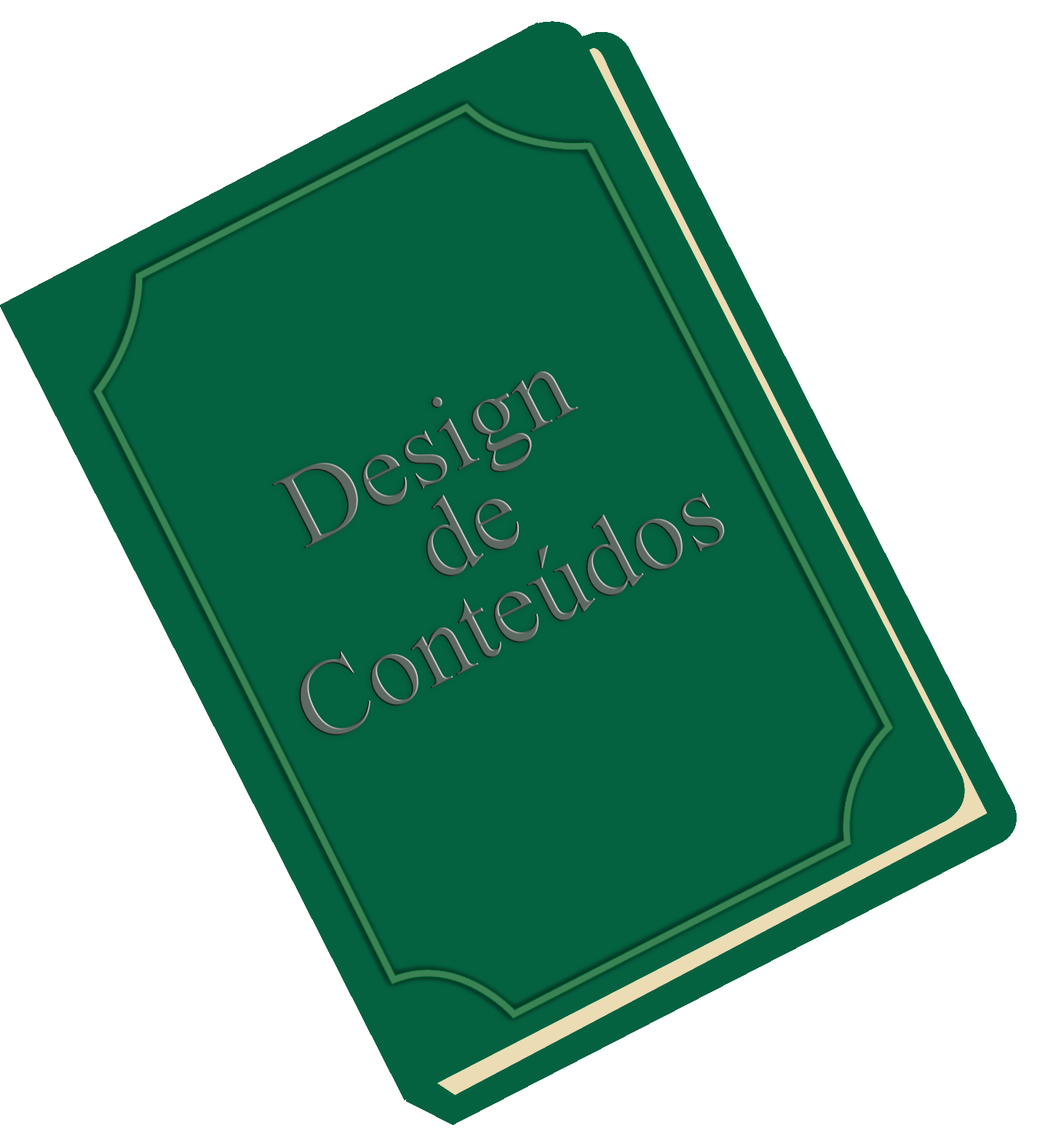
<style>
.page{position:relative;width:1045px;height:1141px;background:#ffffff}
.page>*{position:absolute;margin:0}
.t1{font:109.2px/91px "TimesNewRomanPSMT";color:#5d6961}
</style>
<div class="page">
<p class="t1" style="left:271px;top:371px;width:454px;height:365px;text-align:center;rotate:-27deg">Design<br>de<br>Conteúdos</p>
</div>
